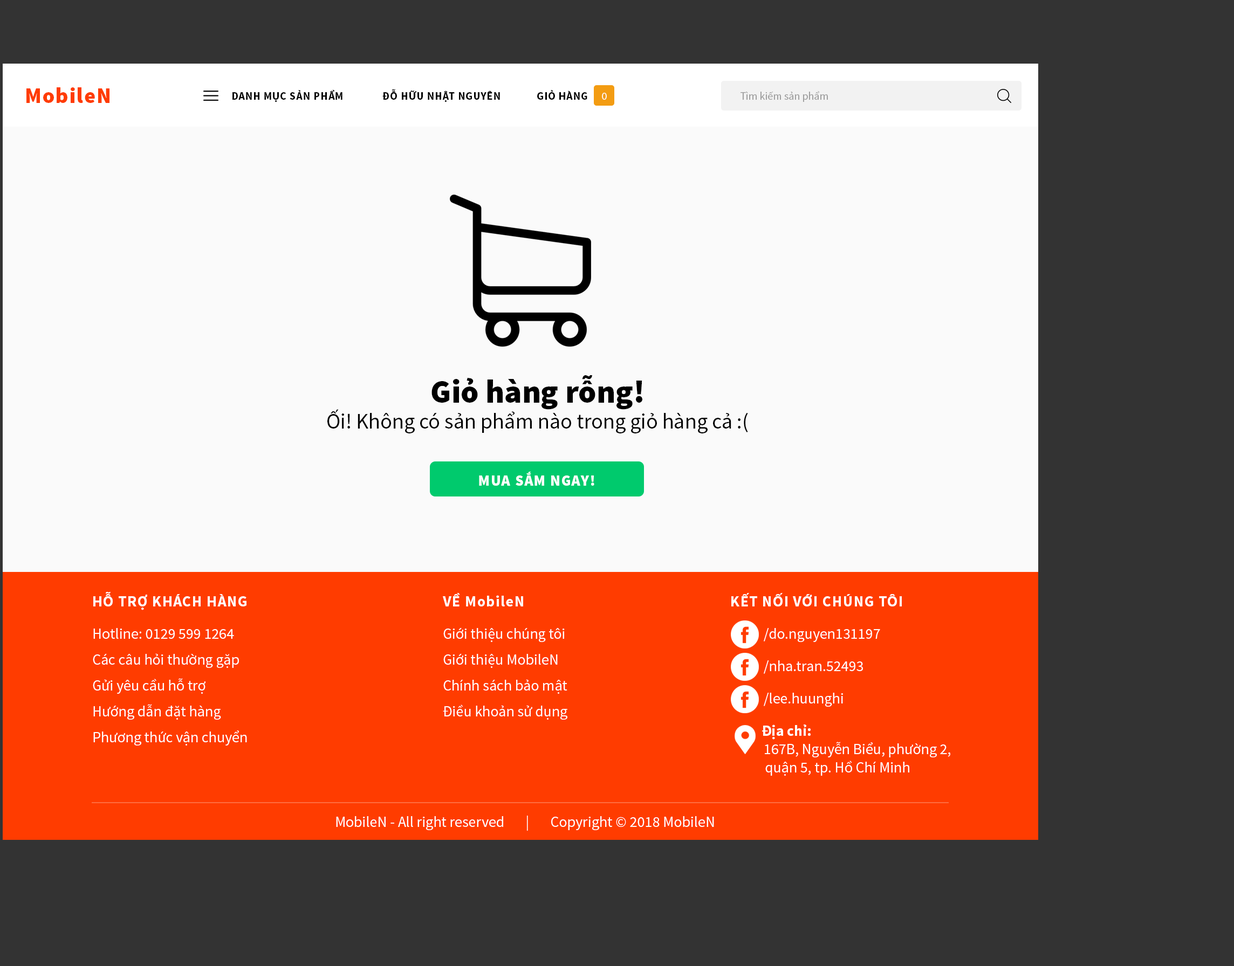
<style>
.page{position:relative;width:1234px;height:966px;background:#fafafa}
.page>*{position:absolute;margin:0}
.t1{font:21.6px "SourceSansPro-Black";letter-spacing:0.05em;color:#ff3c00}
.t2{font:10.8px "SourceSansPro-Bold";letter-spacing:0.05em;color:#000000}
.t3{font:10.9px "SourceSansPro-Bold";letter-spacing:0.05em;color:#000000}
.t4{font:10.8px "SourceSansPro-Regular";color:#fffefe}
.t5{font:10.8px "SourceSansPro-Regular";color:#9a9a9a}
.t6{font:21.6px "SourceSansPro-Regular";color:#000000}
.t7{font:32.4px "SourceSansPro-Black";color:#000000}
.t8{font:15.1px "SourceSansPro-Black";letter-spacing:0.05em;color:#ffffff}
.t9{font:15.1px/25.9px "SourceSansPro-Regular";color:#ffffff}
.t10{font:15.1px "SourceSansPro-Bold";letter-spacing:0.05em;color:#ffffff}
.t11{font:15.1px/32.4px "SourceSansPro-Regular";color:#ffffff}
.t12{font:15.1px/32.4px "SourceSansPro-Bold";color:#ffffff}
.t13{font:15.1px "SourceSansPro-Regular";color:#ffffff}
</style>
<div class="page">
<p class="t1" style="left:26px;top:87px;width:83px;height:16px">MobileN</p>
<p class="t2" style="left:232px;top:90px;width:110px;height:12px">DANH MỤC SẢN PHẨM</p>
<p class="t3" style="left:382px;top:89px;width:118px;height:13px">ĐỖ HỮU NHẬT NGUYÊN</p>
<p class="t3" style="left:537px;top:90px;width:50px;height:10px">GIỎ HÀNG</p>
<p class="t4" style="left:602px;top:93px;width:5px;height:7px">0</p>
<p class="t5" style="left:740px;top:91px;width:88px;height:11px">Tìm kiếm sản phẩm</p>
<p class="t6" style="left:327px;top:375px;width:421px;height:59px;text-align:center"><span class="t7">Giỏ hàng rỗng!<br></span>Ối! Không có sản phẩm nào trong giỏ hàng cả :(</p>
<p class="t8" style="left:479px;top:472px;width:115px;height:14px">MUA SẮM NGAY!</p>
<p class="t9" style="left:93px;top:592px;width:154px;height:154px"><span class="t10">HỖ TRỢ KHÁCH HÀNG<br></span><span class="t11">Hotline: 0129 599 1264<br></span>Các câu hỏi thường gặp<br>Gửi yêu cầu hỗ trợ<br>Hướng dẫn đặt hàng<br>Phương thức vận chuyển</p>
<p class="t9" style="left:443px;top:593px;width:124px;height:127px"><span class="t10">VỀ MobileN<br></span><span class="t11">Giới thiệu chúng tôi<br></span>Giới thiệu MobileN<br>Chính sách bảo mật<br>Điều khoản sử dụng</p>
<p class="t11" style="left:731px;top:593px;width:219px;height:183px"><span class="t10">KẾT NỐI VỚI CHÚNG TÔI<br></span>           /do.nguyen131197<br>           /nha.tran.52493<br>           /lee.huunghi<br>     <span class="t12">Địa chỉ:<br></span><span class="t13">           167B, Nguyễn Biểu, phường 2,<br>      quận 5, tp. Hồ Chí Minh</span></p>
<p class="t13" style="left:336px;top:816px;width:378px;height:15px">MobileN - All right reserved   |   Copyright © 2018 MobileN</p>
</div>
